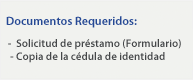
<style>
.page{position:relative;width:193px;height:80px;background:#f1f2ef}
.page>*{position:absolute;margin:0}
.t1{font:11px "MyriadPro-Semibold";color:#454749}
</style>
<div class="page">
<p class="t1" style="left:8px;top:39px;width:173px;height:24px">-  Solicitud de préstamo (Formulario)<br> - Copia de la cédula de identidad</p>
</div>
